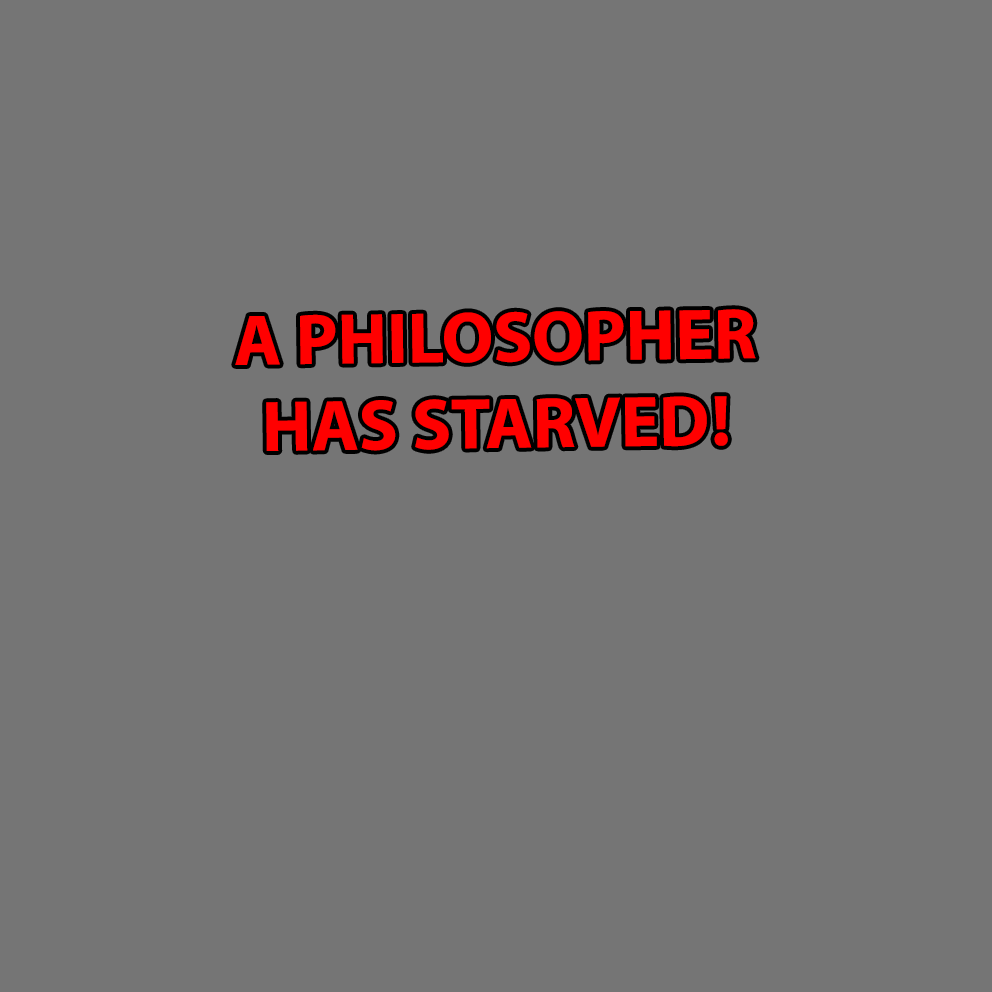
<style>
.page{position:relative;width:992px;height:992px;background:#757575}
.page>*{position:absolute;margin:0}
.t1{font:72px "MyriadHebrew-Bold";color:#ff0000}
</style>
<div class="page">
<p class="t1" style="left:235px;top:309px;width:521px;height:142px;text-align:center;rotate:-1deg">A PHILOSOPHER <br>HAS STARVED!</p>
</div>
